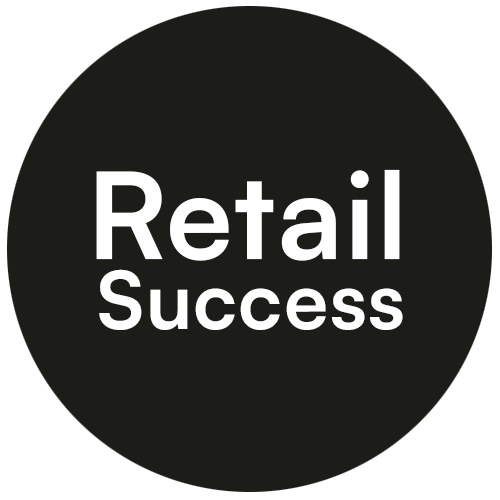
<style>
.page{position:relative;width:500px;height:500px;background:#1c1c18}
.page>*{position:absolute;margin:0}
.t1{font:119.7px "Satoshi-Bold";letter-spacing:0.02em;color:#ffffff}
.t2{font:79.5px "Satoshi-Bold";letter-spacing:0.02em;color:#ffffff}
</style>
<div class="page">
<p class="t1" style="left:96px;top:169px;width:304px;height:92px">Retail</p>
<p class="t2" style="left:99px;top:269px;width:304px;height:61px">Success</p>
</div>
